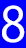
<style>
.page{position:relative;width:26px;height:48px;background:#0000ff}
.page>*{position:absolute;margin:0}
.t1{font:47.6px "KozGoPr6N-Regular";color:#ffffff}
</style>
<div class="page">
<p class="t1" style="left:2px;top:5px;width:23px;height:38px">8</p>
</div>
